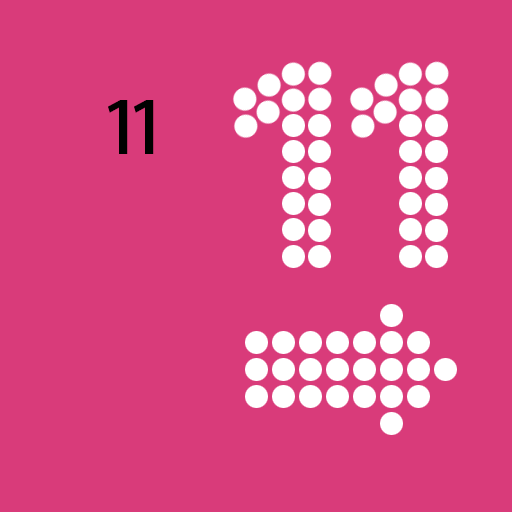
<style>
.page{position:relative;width:512px;height:512px;background:#d93b7a}
.page>*{position:absolute;margin:0}
.t1{font:72px "AdobeHeitiStd-Regular";color:#010101}
</style>
<div class="page">
<p class="t1" style="left:108px;top:100px;width:20px;height:54px">1</p>
<p class="t1" style="left:134px;top:100px;width:20px;height:54px">1</p>
</div>
